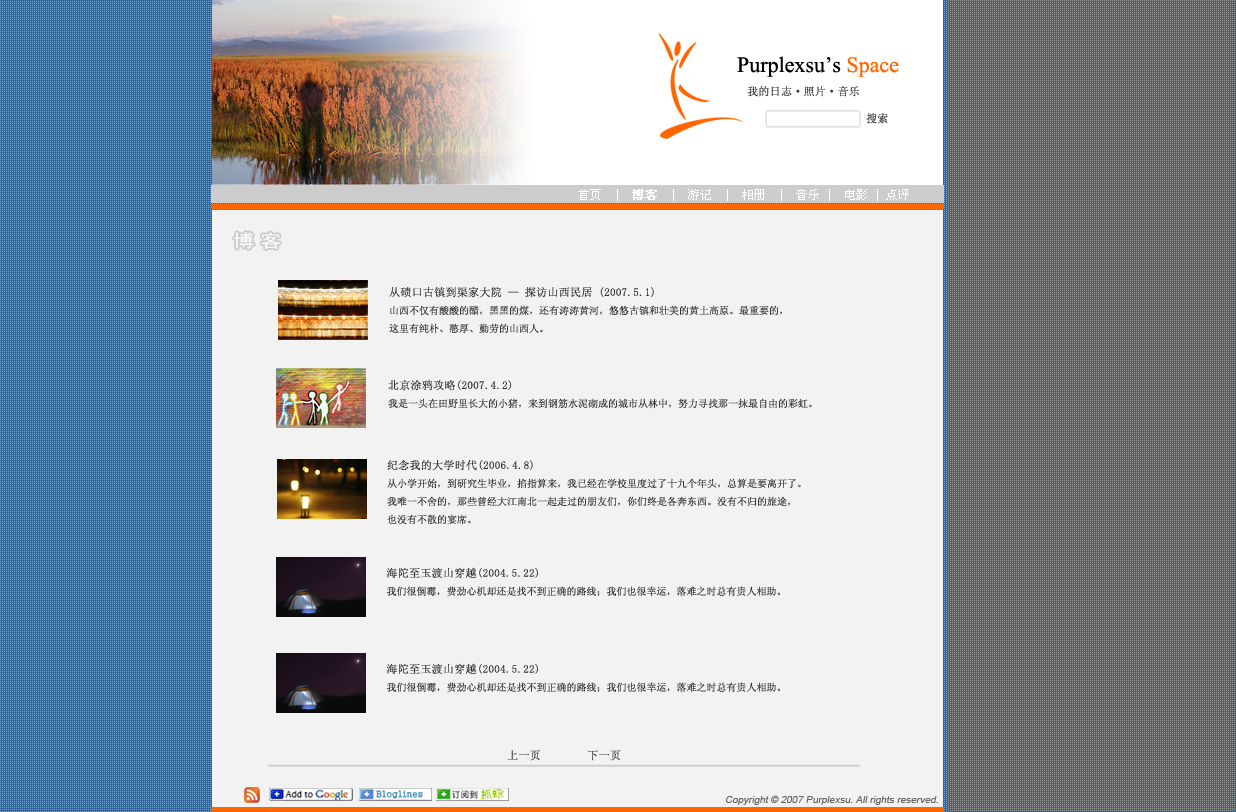
<style>
.page{position:relative;width:1236px;height:812px;background:#f2f2f2}
.page>*{position:absolute;margin:0}
.t1{font:22px "TimesNewRomanPSMT";color:#000000}
.t2{font:22px "TimesNewRomanPSMT";color:#ff6600}
.t3{font:11px "SimSun";color:#333333;font-weight:bold}
.t4{font:12px "SimSun";color:#ffffff}
.t5{font:12px "SimSun";color:#ffffff;font-weight:bold}
.t6{font:18px "SimHei";letter-spacing:0.24em;color:#ffffff;scale:1.2 1}
.t7{font:10px/18px "SimSun";color:#333333}
.t8{font:11px/18px "SimSun";color:#333333;font-weight:bold}
.t9{font:11px "SimSun";font-weight:bold}
.t10{font:10px "ArialMT";color:#666666;font-style:italic}
</style>
<div class="page">
<p class="t1" style="left:737px;top:56px;width:162px;height:21px">Purplexsu’s <span class="t2">Space</span></p>
<p class="t3" style="left:747px;top:86px;width:112px;height:11px">我的日志·照片·音乐</p>
<p class="t3" style="left:866px;top:113px;width:22px;height:11px">搜索</p>
<p class="t4" style="left:578px;top:189px;width:331px;height:12px">首页  |  <span class="t5">博客</span>  |  游记  |  相册  |  音乐 |  电影 | 点评</p>
<p class="t6" style="left:234px;top:232px;width:46px;height:18px">博客</p>
<p class="t7" style="left:389px;top:287px;width:393px;height:47px"><span class="t8">从碛口古镇到渠家大院 — 探访山西民居 (2007.5.1)<br></span>山西不仅有酸酸的醋，黑黑的煤，还有涛涛黄河，悠悠古镇和壮美的黄土高原。最重要的，<br>这里有纯朴、憨厚、勤劳的山西人。</p>
<p class="t7" style="left:388px;top:379px;width:424px;height:30px"><span class="t8">北京涂鸦攻略(2007.4.2)<br></span>我是一头在田野里长大的小猪，来到钢筋水泥砌成的城市从林中，努力寻找那一抹最自由的彩虹。</p>
<p class="t7" style="left:387px;top:460px;width:414px;height:65px"><span class="t8">纪念我的大学时代(2006.4.8)<br></span>从小学开始，到研究生毕业，掐指算来，我已经在学校里度过了十九个年头，总算是要离开了。<br>我唯一不舍的，那些曾经大江南北一起走过的朋友们，你们终是各奔东西。没有不归的旅途，<br>也没有不散的宴席。</p>
<p class="t7" style="left:386px;top:567px;width:394px;height:29px"><span class="t8">海陀至玉渡山穿越(2004.5.22)<br></span>我们很倒霉，费劲心机却还是找不到正确的路线；我们也很幸运，落难之时总有贵人相助。</p>
<p class="t7" style="left:386px;top:663px;width:394px;height:29px"><span class="t8">海陀至玉渡山穿越(2004.5.22)<br></span>我们很倒霉，费劲心机却还是找不到正确的路线；我们也很幸运，落难之时总有贵人相助。</p>
<p class="t9" style="left:507px;top:750px;width:114px;height:11px">上一页        下一页</p>
<p class="t10" style="left:726px;top:795px;width:212px;height:10px">Copyright © 2007 Purplexsu. All rights reserved.</p>
</div>
